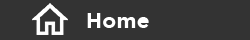
<style>
.page{position:relative;width:250px;height:40px;background:#333333}
.page>*{position:absolute;margin:0}
.t1{font:21.3px "GothamBold";color:#ffffff}
</style>
<div class="page">
<p class="t1" style="left:87px;top:13px;width:62px;height:15px">Home</p>
</div>
